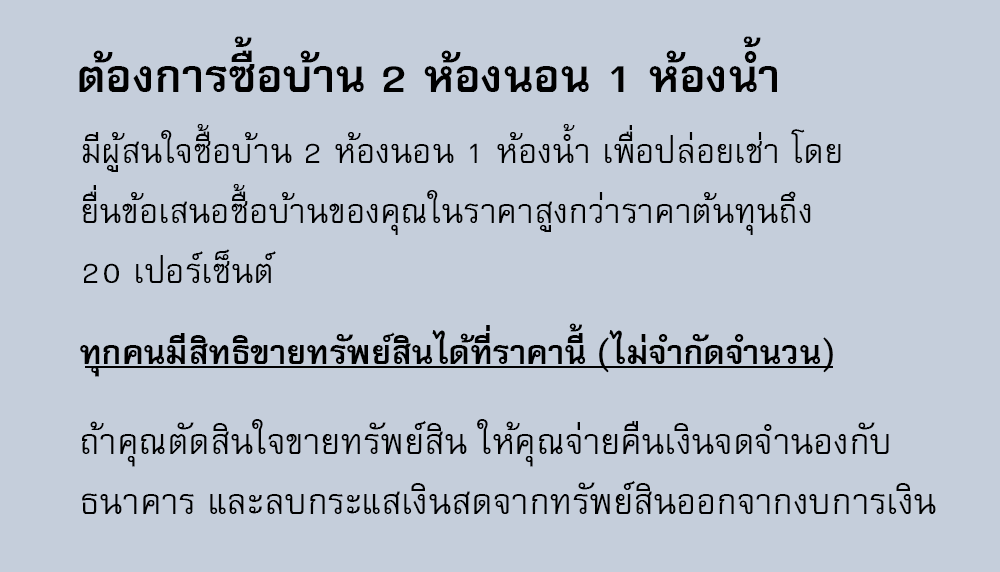
<style>
.page{position:relative;width:1000px;height:572px;background:#c5cedb}
.page>*{position:absolute;margin:0}
.t1{font:64px "FreesiaUPCBold";color:#000000}
.t2{font:48px/60px "FreesiaUPC";color:#000000}
.t3{font:47px "FreesiaUPCBold";color:#000000}
.t4{font:50px/60px "FreesiaUPC";color:#000000}
</style>
<div class="page">
<p class="t1" style="left:79px;top:36px;width:698px;height:56px">ต้องการซื้อบ้าน 2 ห้องนอน 1 ห้องน้ำ</p>
<p class="t2" style="left:82px;top:124px;width:759px;height:159px">มีผู้สนใจซื้อบ้าน 2 ห้องนอน 1 ห้องน้ำ เพื่อปล่อยเช่า โดย<br>ยื่นข้อเสนอซื้อบ้านของคุณในราคาสูงกว่าราคาต้นทุนถึง <br>20 เปอร์เซ็นต์</p>
<p class="t3" style="left:80px;top:323px;width:753px;height:54px">ทุกคนมีสิทธิขายทรัพย์สินได้ที่ราคานี้ (ไม่จำกัดจำนวน)</p>
<p class="t4" style="left:82px;top:419px;width:854px;height:95px">ถ้าคุณตัดสินใจขายทรัพย์สิน ให้คุณจ่ายคืนเงินจดจำนองกับ<br>ธนาคาร และลบกระแสเงินสดจากทรัพย์สินออกจากงบการเงิน</p>
</div>
